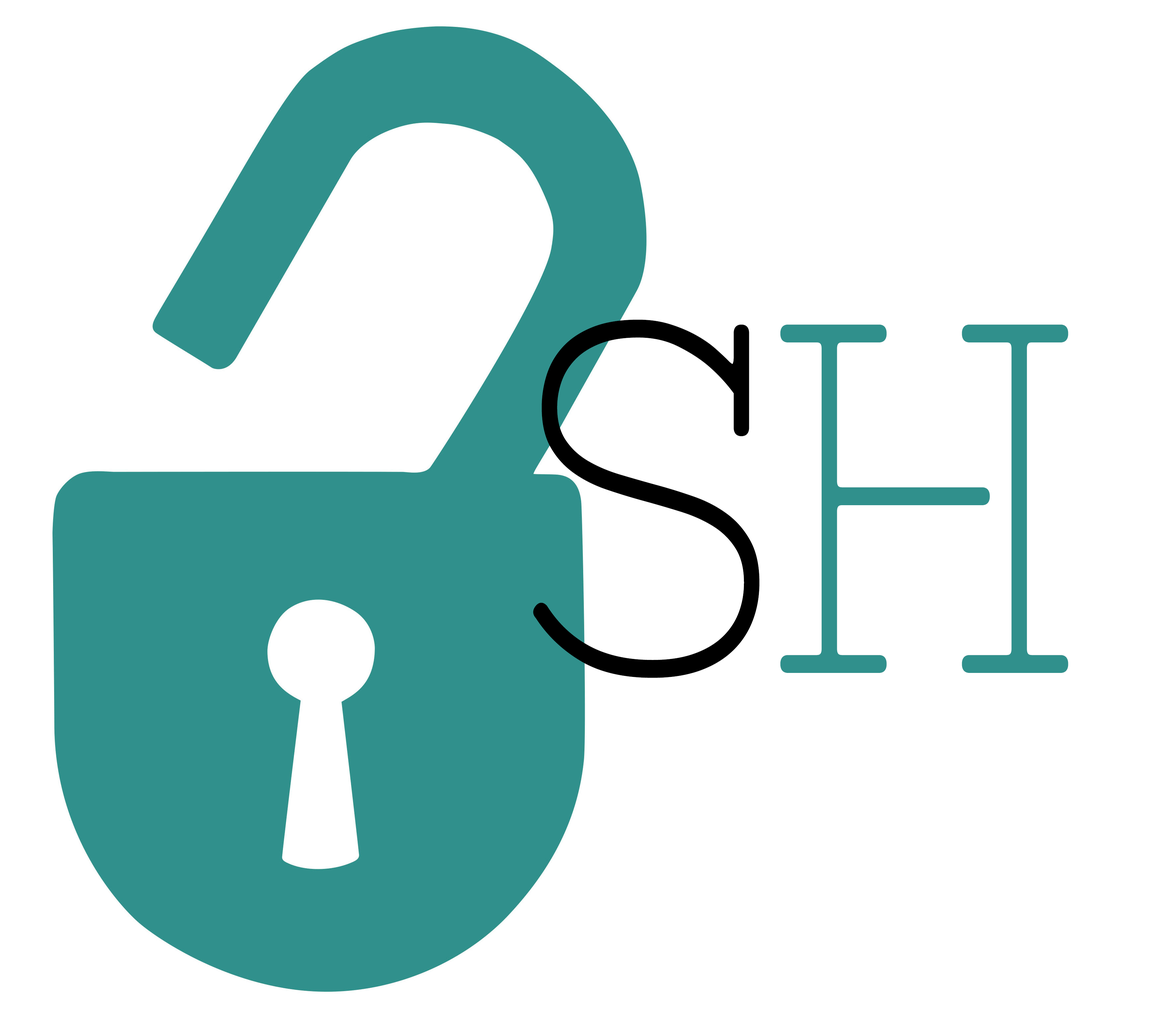
<style>
.page{position:relative;width:1165px;height:1023px;background:#ffffff}
.page>*{position:absolute;margin:0}
.t1{font:493.3px "NixieOne";letter-spacing:-0.07em;color:#000000;font-weight:bold;scale:0.84 1}
.t2{font:493.3px "NixieOne";letter-spacing:-0.07em;color:#30908c;font-weight:bold;scale:0.84 1}
</style>
<div class="page">
<p class="t1" style="left:533px;top:320px;width:536px;height:358px">S<span class="t2">H</span></p>
</div>
